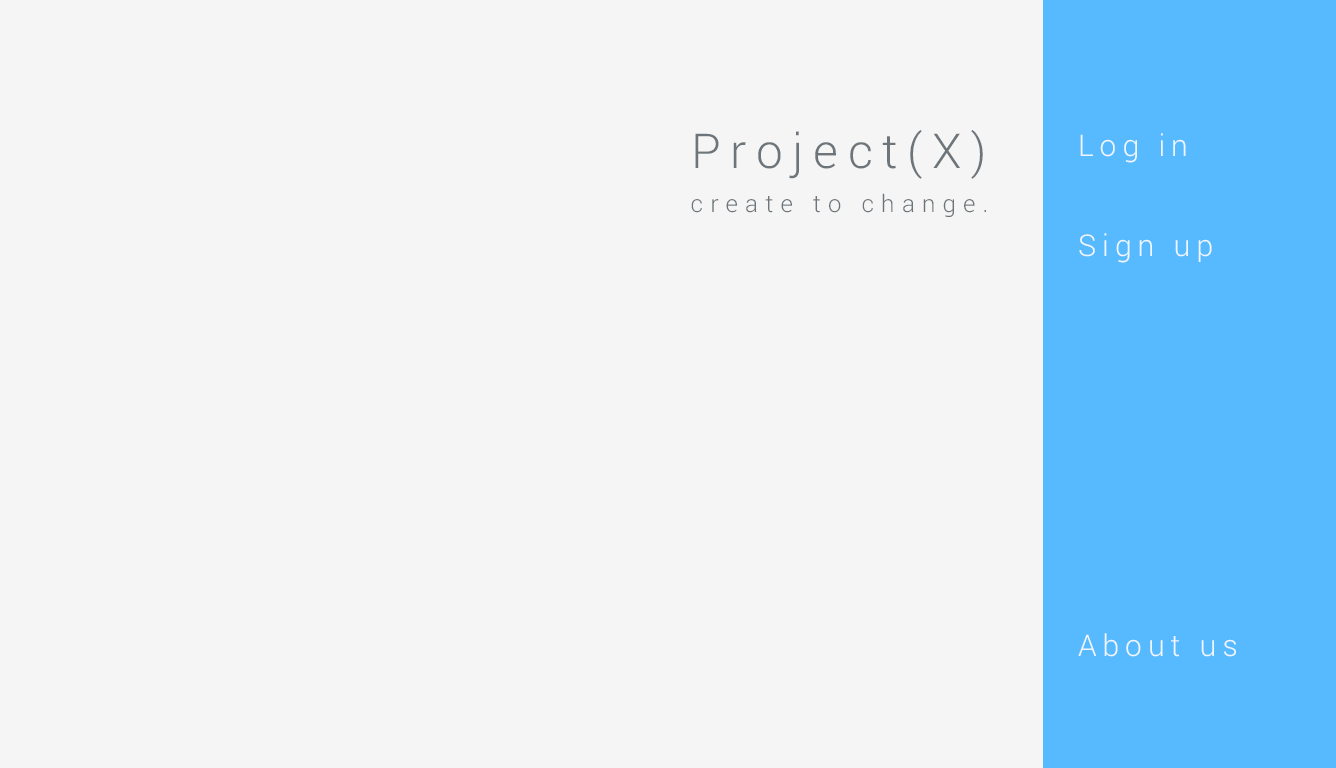
<style>
.page{position:relative;width:1336px;height:768px;background:#f5f5f5}
.page>*{position:absolute;margin:0}
.t1{font:48px "Roboto-Light";letter-spacing:0.2em;color:#6d757a}
.t2{font:30px/100px "Roboto-Light";letter-spacing:0.2em;color:#f0f6fa}
.t3{font:24px "Roboto-Light";letter-spacing:0.3em;color:#6d757a}
</style>
<div class="page">
<p class="t1" style="left:695px;top:130px;width:288px;height:49px">Project(X)</p>
<p class="t2" style="left:1078px;top:133px;width:158px;height:524px">Log in<br>Sign up<br><br><br><br>About us</p>
<p class="t3" style="left:691px;top:193px;width:295px;height:24px">create to change.</p>
</div>
